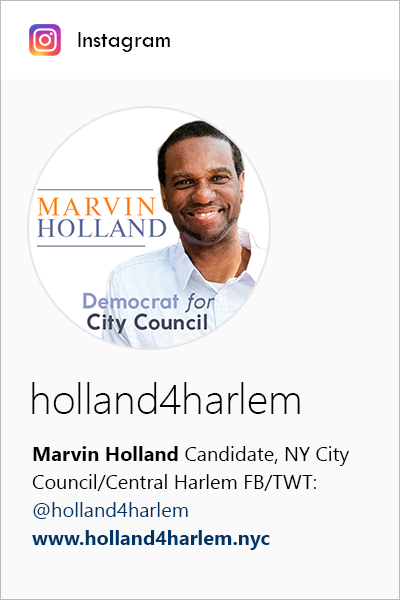
<style>
.page{position:relative;width:400px;height:600px;background:#fafafa}
.page>*{position:absolute;margin:0}
.t1{font:24px "TwCenMT-Regular";color:#000000}
.t2{font:42px "SegoeUI-Light";color:#000000}
.t3{font:20px/28px "SegoeUI";color:#000000}
.t4{font:20px/28px "SegoeUI-Bold";color:#000000}
.t5{font:20px/28px "SegoeUI";color:#003569}
.t6{font:20px/28px "SegoeUI-Bold";color:#003569}
</style>
<div class="page">
<p class="t1" style="left:78px;top:32px;width:92px;height:20px">Instagram</p>
<p class="t2" style="left:32px;top:382px;width:268px;height:32px">holland4harlem</p>
<p class="t3" style="left:32px;top:446px;width:317px;height:104px"><span class="t4">Marvin Holland</span> Candidate, NY City Council/Central Harlem FB/TWT: <span class="t5">@holland4harlem </span><span class="t6">www.holland4harlem.nyc</span></p>
</div>
